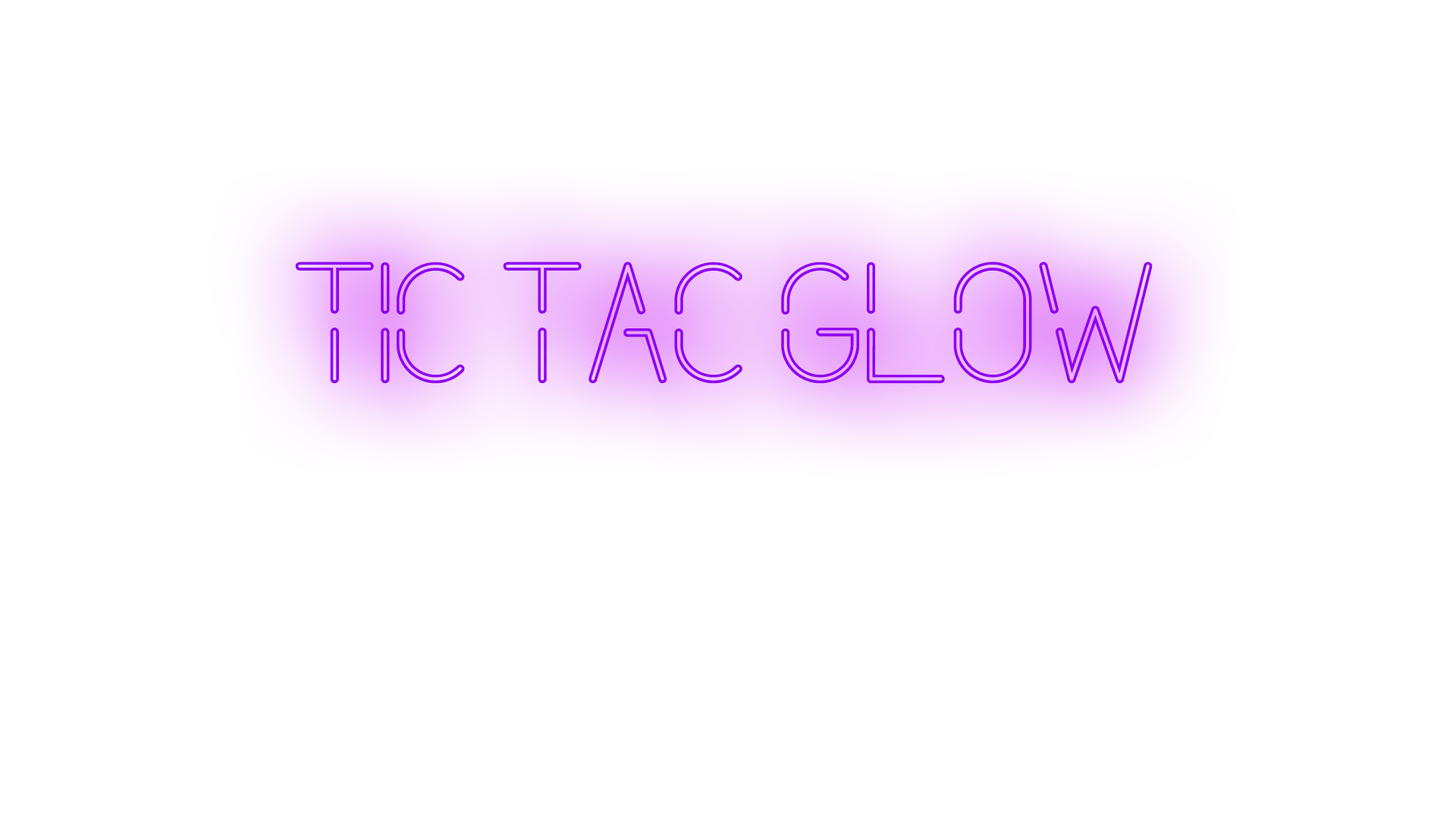
<style>
.page{position:relative;width:1456px;height:819px;background:#ffffff}
.page>*{position:absolute;margin:0}
.t1{font:129.4px "NeonFuture";color:#8e00f1}
</style>
<div class="page">
<p class="t1" style="left:295px;top:262px;width:858px;height:122px">Tic Tac GloW</p>
</div>
